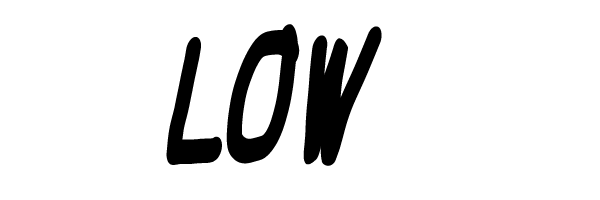
<style>
.page{position:relative;width:600px;height:200px;background:#ffffff}
.page>*{position:absolute;margin:0}
.t1{font:100px "ThickerThanOlLeftalic";color:#000000;text-transform:uppercase;scale:0.58 1}
</style>
<div class="page">
<p class="t1" style="left:166px;top:24px;width:216px;height:142px">low</p>
</div>
